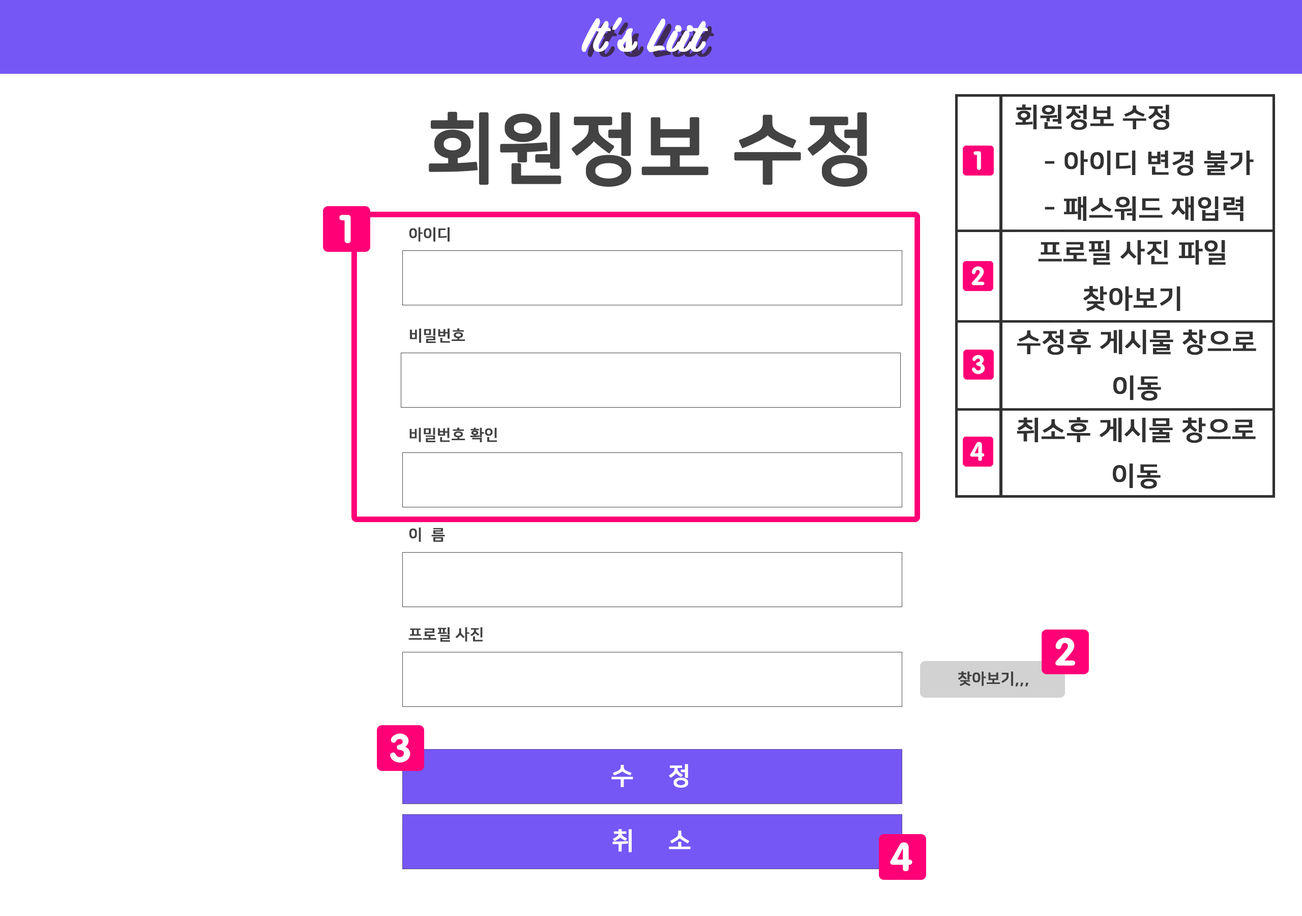
<style>
.page{position:relative;width:1302px;height:916px;background:#ffffff}
.page>*{position:absolute;margin:0}
.t1{font:50.9px "SignPainter-HouseScriptSemibold";color:#ffffff;font-weight:bold}
.t2{font:50.9px "SignPainter-HouseScriptSemibold";color:#3f2b56;font-weight:bold}
.t3{font:76.3px "NanumSquareB";color:#434343;font-weight:bold}
.t4{font:26.2px "NanumSquareB";color:#313131;font-weight:bold}
.t5{font:15.3px "NanumSquareB";color:#434343;font-weight:bold}
.t6{font:24.4px "NanumSquareB";color:#ffffff;font-weight:bold}
</style>
<div class="page">
<p class="t1" style="left:581px;top:17px;width:127px;height:35px">It’s Liit</p>
<p class="t2" style="left:588px;top:22px;width:126px;height:35px">It’s Liit</p>
<p class="t3" style="left:429px;top:111px;width:438px;height:76px">회원정보 수정</p>
<p class="t4" style="left:1016px;top:104px;width:238px;height:117px">회원정보 수정<br>    - 아이디 변경 불가<br>    - 패스워드 재입력</p>
<p class="t5" style="left:409px;top:227px;width:41px;height:15px">아이디</p>
<p class="t4" style="left:1038px;top:240px;width:188px;height:71px;text-align:center">프로필 사진 파일<br>찾아보기</p>
<p class="t5" style="left:410px;top:328px;width:55px;height:15px">비밀번호</p>
<p class="t4" style="left:1017px;top:329px;width:239px;height:72px;text-align:center">수정후 게시물 창으로 이동</p>
<p class="t4" style="left:1017px;top:417px;width:239px;height:72px;text-align:center">취소후 게시물 창으로 이동</p>
<p class="t5" style="left:410px;top:427px;width:87px;height:15px">비밀번호 확인</p>
<p class="t5" style="left:409px;top:527px;width:36px;height:15px">이  름</p>
<p class="t5" style="left:408px;top:627px;width:75px;height:14px">프로필 사진</p>
<p class="t6" style="left:611px;top:764px;width:77px;height:23px">수     정</p>
<p class="t6" style="left:612px;top:829px;width:79px;height:23px">취     소</p>
</div>
